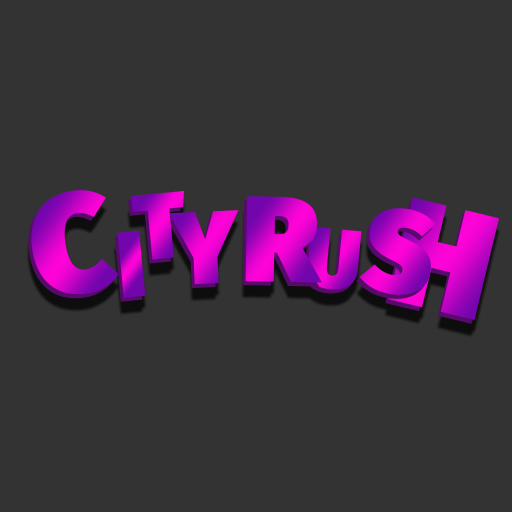
<style>
.page{position:relative;width:512px;height:512px;background:#333333}
.page>*{position:absolute;margin:0}
.t1{font:140.3px "FiraSans-Ultra"}
.t2{font:93.5px "FiraSans-Ultra"}
.t3{font:121.6px "FiraSans-Ultra"}
.t4{font:149.7px "FiraSans-Ultra"}
.t5{font:116.9px "FiraSans-Ultra"}
.t6{font:103px "FiraSans-Ultra"}
.t7{font:84.2px "FiraSans-Ultra"}
</style>
<div class="page">
<p class="t1" style="left:31px;top:190px;width:88px;height:105px;rotate:-9deg">C</p>
<p class="t2" style="left:131px;top:191px;width:53px;height:69px;rotate:-5deg">T</p>
<p class="t3" style="left:245px;top:196px;width:77px;height:87px;rotate:1deg">R</p>
<p class="t4" style="left:388px;top:197px;width:111px;height:123px;rotate:14deg">H</p>
<p class="t5" style="left:359px;top:208px;width:77px;height:87px;rotate:8deg">S</p>
<p class="t6" style="left:168px;top:210px;width:71px;height:75px;rotate:-3deg">Y</p>
<p class="t2" style="left:117px;top:230px;width:29px;height:68px;rotate:-5deg">I</p>
<p class="t7" style="left:307px;top:226px;width:55px;height:64px;rotate:5deg">U</p>
</div>
